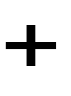
<style>
.page{position:relative;width:71px;height:96px;background:#ffffff}
.page>*{position:absolute;margin:0}
.t1{font:89.4px "MicrosoftSansSerif";color:#010101;scale:1.19 1}
</style>
<div class="page">
<p class="t1" style="left:5px;top:25px;width:52px;height:41px">+</p>
</div>
